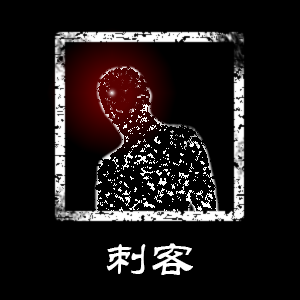
<style>
.page{position:relative;width:300px;height:300px;background:#000000}
.page>*{position:absolute;margin:0}
.t1{font:45.8px "STLiti";letter-spacing:0.01em;color:#ffffff}
</style>
<div class="page">
<p class="t1" style="left:106px;top:243px;width:87px;height:32px">刺客</p>
</div>
